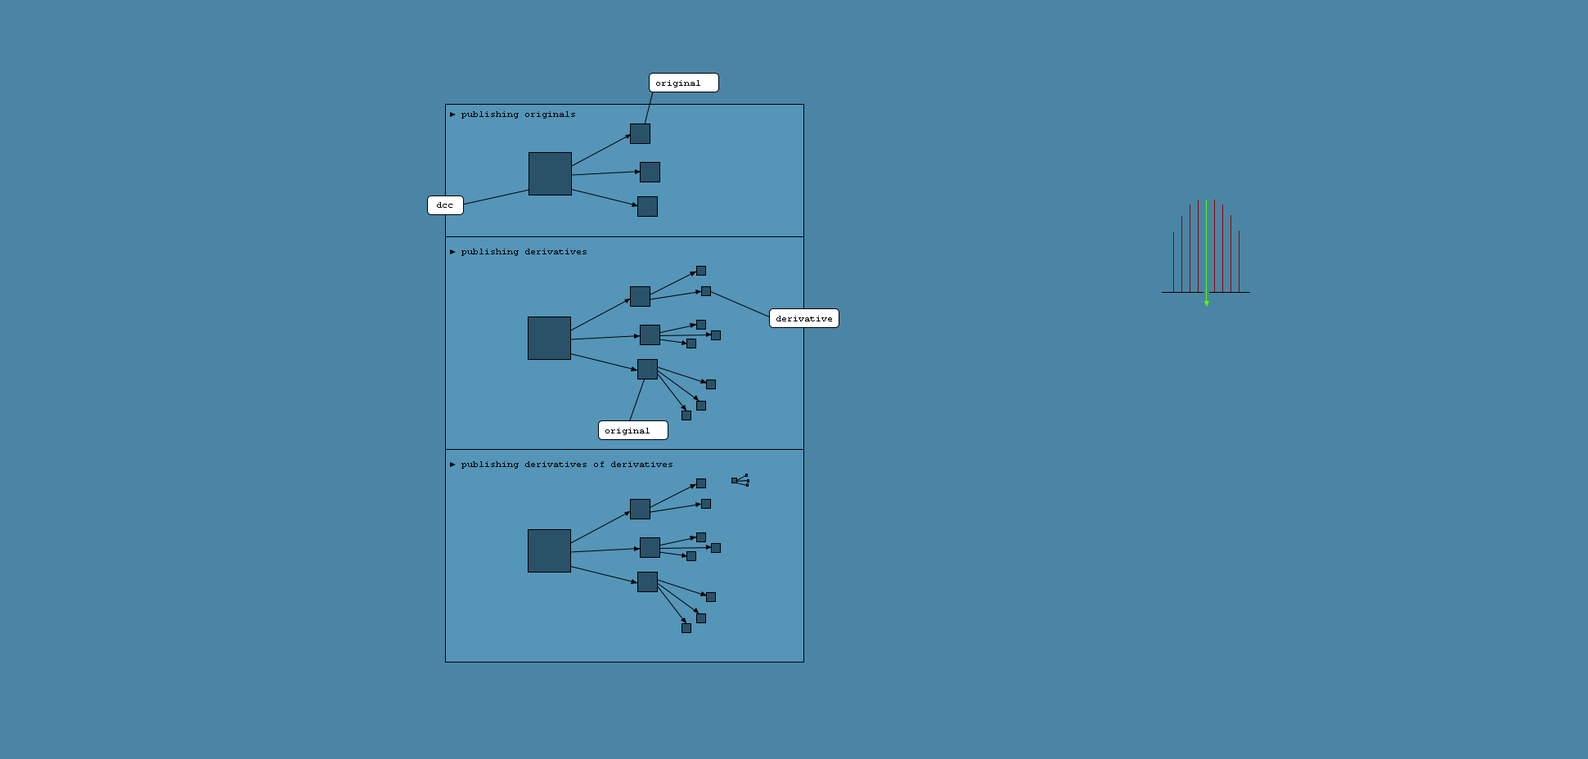
<style>
.page{position:relative;width:1588px;height:759px;background:#4b85a5}
.page>*{position:absolute;margin:0}
.t1{font:9px "CourierNewPSMT";color:#000000}
</style>
<div class="page">
<p class="t1" style="left:656px;top:80px;width:44px;height:8px">original</p>
<p class="t1" style="left:461px;top:111px;width:114px;height:8px">publishing originals</p>
<p class="t1" style="left:437px;top:202px;width:15px;height:6px">dcc</p>
<p class="t1" style="left:461px;top:249px;width:126px;height:7px">publishing derivatives</p>
<p class="t1" style="left:776px;top:316px;width:56px;height:6px">derivative</p>
<p class="t1" style="left:605px;top:428px;width:45px;height:7px">original</p>
<p class="t1" style="left:461px;top:461px;width:212px;height:8px">publishing derivatives of derivatives</p>
</div>
